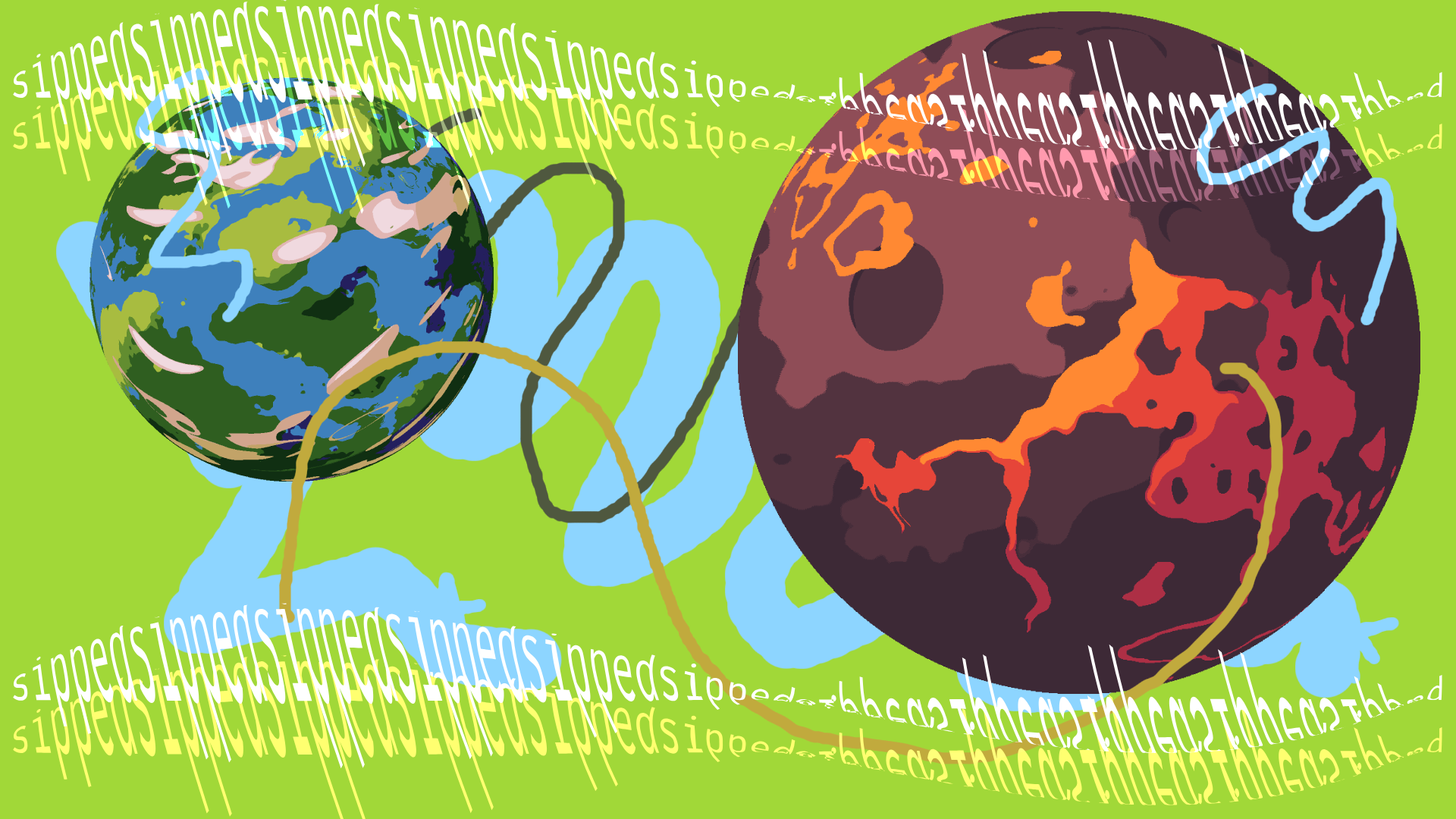
<style>
.page{position:relative;width:1456px;height:819px;background:#a1d838}
.page>*{position:absolute;margin:0}
.t1{font:36.2px "FiraMono-Regular";color:#ffffff}
.t2{font:36.2px "FiraMono-Regular"}
</style>
<div class="page">
<p class="t1" style="left:13px;top:0px;width:1429px;height:168px">sippedsippedsippedsippedsippedsippedsippedsippedsippedsippedsipped</p>
<p class="t2" style="left:13px;top:52px;width:1429px;height:163px">sippedsippedsippedsippedsippedsippedsippedsippedsippedsippedsipped</p>
<p class="t1" style="left:13px;top:603px;width:1429px;height:165px">sippedsippedsippedsippedsippedsippedsippedsippedsippedsippedsipped</p>
</div>
